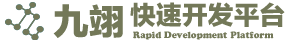
<style>
.page{position:relative;width:303px;height:42px;background:#ffffff}
.page>*{position:absolute;margin:0}
.t1{font:36px "FZLTTHK--GBK1-0";letter-spacing:-0.005em;color:#737858}
.t2{font:26px "FZLTTHK--GBK1-0";letter-spacing:-0.005em;color:#737858}
.t3{font:9px "CooperBlackStd";letter-spacing:-0.005em;color:#737858}
</style>
<div class="page">
<p class="t1" style="left:53px;top:4px;width:70px;height:34px">九翊</p>
<p class="t2" style="left:130px;top:2px;width:155px;height:26px">快速开发平台</p>
<p class="t3" style="left:133px;top:31px;width:141px;height:9px">Rapid Development Platform</p>
</div>
